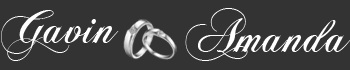
<style>
.page{position:relative;width:350px;height:70px;background:#333333}
.page>*{position:absolute;margin:0}
.t1{font:50px "ChopinScript";color:#ffffff}
</style>
<div class="page">
<p class="t1" style="left:1px;top:10px;width:118px;height:51px">Gavin</p>
<p class="t1" style="left:185px;top:8px;width:166px;height:53px">Amanda</p>
</div>
